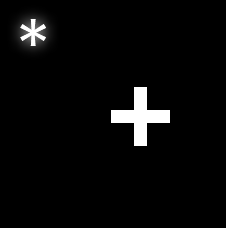
<style>
.page{position:relative;width:226px;height:228px;background:#000000}
.page>*{position:absolute;margin:0}
.t1{font:66.3px "Consolas";color:#ffffff}
</style>
<div class="page">
<p class="t1" style="left:20px;top:19px;width:26px;height:27px">*</p>
</div>
